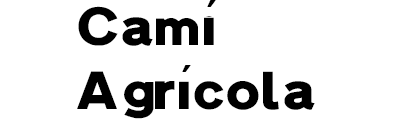
<style>
.page{position:relative;width:420px;height:120px;background:#ffffff}
.page>*{position:absolute;margin:0}
.t1{font:53.1px "Ccrige-Regular";color:#000000;scale:1.13 1}
</style>
<div class="page">
<p class="t1" style="left:77px;top:6px;width:238px;height:113px">Cami<br>Agricola</p>
</div>
